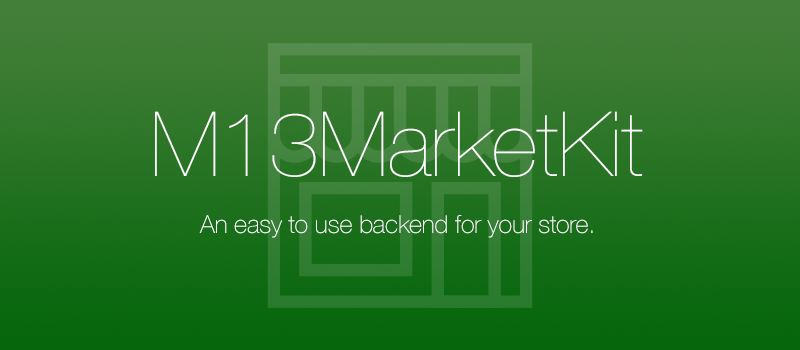
<style>
.page{position:relative;width:800px;height:350px}
.page>*{position:absolute;margin:0}
.t1{font:90px "HelveticaNeue-UltraLight";letter-spacing:-0.007em;color:#ffffff}
.t2{font:25px "HelveticaNeue-Thin";letter-spacing:-0.007em;color:#ffffff}
</style>
<div class="page">
<p class="t1" style="left:155px;top:111px;width:488px;height:66px">M13MarketKit</p>
<p class="t2" style="left:199px;top:215px;width:394px;height:23px">An easy to use backend for your store.</p>
</div>
